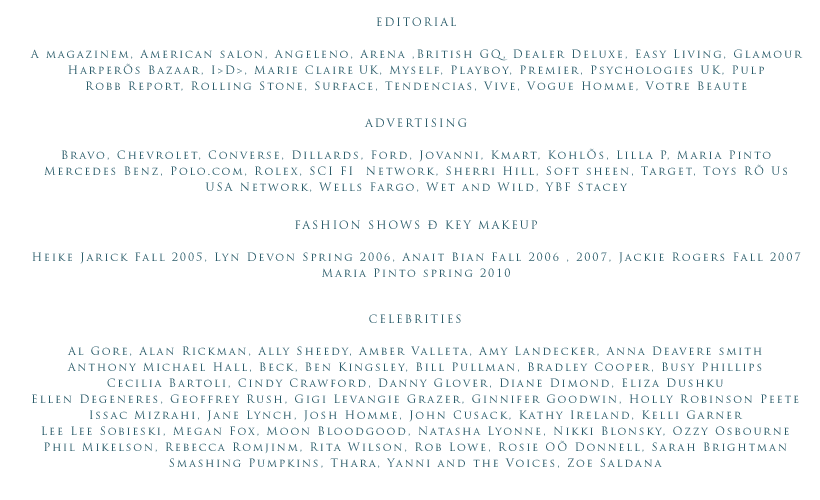
<style>
.page{position:relative;width:820px;height:500px;background:#ffffff}
.page>*{position:absolute;margin:0}
.t1{font:11px/16px "TrajanPro-Regular";letter-spacing:0.165em;color:#285a68}
</style>
<div class="page">
<p class="t1" style="left:30px;top:17px;width:773px;height:74px;text-align:center">EDITORIAL<br><br>A magazinem, American salon, Angeleno, Arena ,British GQ, Dealer Deluxe, Easy Living, Glamour<br>HarperÕs Bazaar, I&gt;D&gt;, Marie Claire UK, Myself, Playboy, Premier, Psychologies UK, Pulp<br>Robb Report, Rolling Stone, Surface, Tendencias, Vive, Vogue Homme, Votre Beaute</p>
<p class="t1" style="left:44px;top:118px;width:743px;height:74px;text-align:center">ADVERTISING<br><br>Bravo, Chevrolet, Converse, Dillards, Ford, Jovanni, Kmart, KohlÕs, Lilla P, Maria Pinto<br>Mercedes Benz, Polo.com, Rolex, SCI FI  Network, Sherri Hill, Soft sheen, Target, Toys RÕ Us<br>USA Network, Wells Fargo, Wet and Wild, YBF Stacey</p>
<p class="t1" style="left:32px;top:220px;width:769px;height:57px;text-align:center">FASHION SHOWS Ð KEY MAKEUP<br> <br>Heike Jarick Fall 2005, Lyn Devon Spring 2006, Anait Bian Fall 2006 , 2007, Jackie Rogers Fall 2007<br>Maria Pinto spring 2010</p>
<p class="t1" style="left:32px;top:314px;width:767px;height:154px;text-align:center">CELEBRITIES<br><br>Al Gore, Alan Rickman, Ally Sheedy, Amber Valleta, Amy Landecker, Anna Deavere smith<br>Anthony Michael Hall, Beck, Ben Kingsley, Bill Pullman, Bradley Cooper, Busy Phillips<br>Cecilia Bartoli, Cindy Crawford, Danny Glover, Diane Dimond, Eliza Dushku<br>Ellen Degeneres, Geoffrey Rush, Gigi Levangie Grazer, Ginnifer Goodwin, Holly Robinson Peete<br>Issac Mizrahi, Jane Lynch, Josh Homme, John Cusack, Kathy Ireland, Kelli Garner<br>Lee Lee Sobieski, Megan Fox, Moon Bloodgood, Natasha Lyonne, Nikki Blonsky, Ozzy Osbourne<br>Phil Mikelson, Rebecca Romjinm, Rita Wilson, Rob Lowe, Rosie OÕ Donnell, Sarah Brightman<br>Smashing Pumpkins, Thara, Yanni and the Voices, Zoe Saldana</p>
</div>
